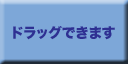
<style>
.page{position:relative;width:128px;height:64px;background:#7da7d8}
.page>*{position:absolute;margin:0}
.t1{font:14px "HiraKakuStd-W8";color:#2e3092}
</style>
<div class="page">
<p class="t1" style="left:13px;top:26px;width:102px;height:14px">ドラッグできます</p>
</div>
